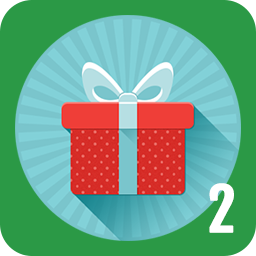
<style>
.page{position:relative;width:256px;height:256px;background:#2b9946}
.page>*{position:absolute;margin:0}
.t1{font:56.9px "FjallaOne-Regular";letter-spacing:-0.03em;color:#ffffff;text-transform:uppercase;font-weight:bold}
</style>
<div class="page">
<p class="t1" style="left:209px;top:183px;width:25px;height:50px">2</p>
</div>
